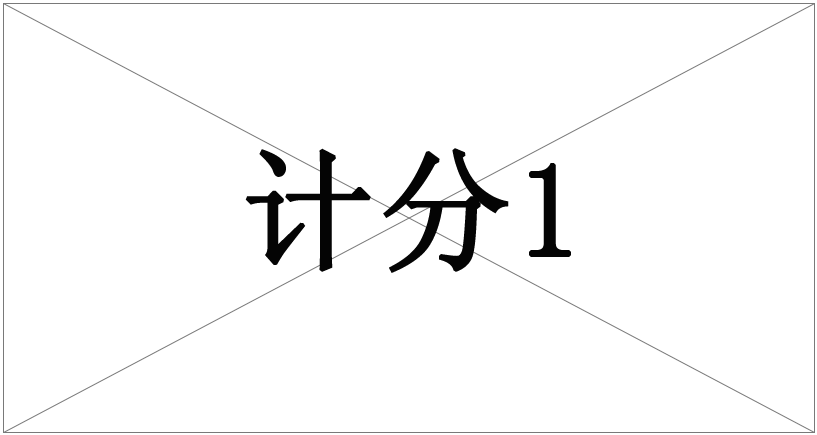
<style>
.page{position:relative;width:817px;height:435px;background:#ffffff}
.page>*{position:absolute;margin:0}
.t1{font:133.3px "SimSun";color:#040404;font-weight:bold}
</style>
<div class="page">
<p class="t1" style="left:245px;top:148px;width:326px;height:125px">计分1</p>
</div>
